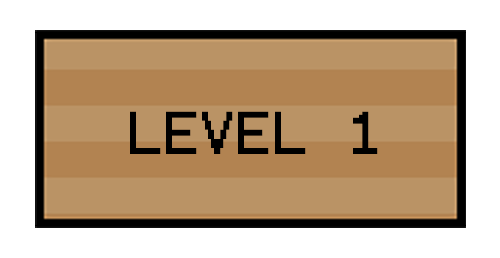
<style>
.page{position:relative;width:500px;height:258px;background:#ffffff}
.page>*{position:absolute;margin:0}
.t1{font:48.4px "Terminal";color:#000000}
</style>
<div class="page">
<p class="t1" style="left:130px;top:111px;width:248px;height:43px">LEVEL 1</p>
</div>
